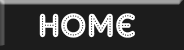
<style>
.page{position:relative;width:184px;height:50px;background:#1c1c1c}
.page>*{position:absolute;margin:0}
.t1{font:33.3px "AdamGorry-Lights";color:#ffffff}
</style>
<div class="page">
<p class="t1" style="left:39px;top:13px;width:96px;height:25px">Home</p>
</div>
